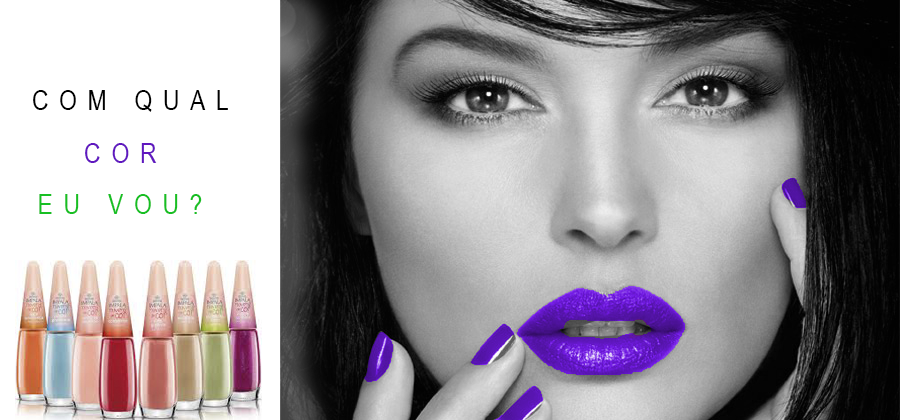
<style>
.page{position:relative;width:900px;height:420px;background:#ffffff}
.page>*{position:absolute;margin:0}
.t1{font:28px "ArialNarrow";letter-spacing:0.38em;color:#000000;text-transform:uppercase}
.t2{font:28px "ArialNarrow";letter-spacing:0.38em;color:#6017bf;text-transform:uppercase}
.t3{font:28px "ArialNarrow";letter-spacing:0.38em;color:#17bf23;text-transform:uppercase}
</style>
<div class="page">
<p class="t1" style="left:33px;top:90px;width:195px;height:22px">COM QUAL</p>
<p class="t2" style="left:85px;top:143px;width:72px;height:20px">cor</p>
<p class="t3" style="left:39px;top:194px;width:163px;height:20px">eu vou?</p>
</div>
